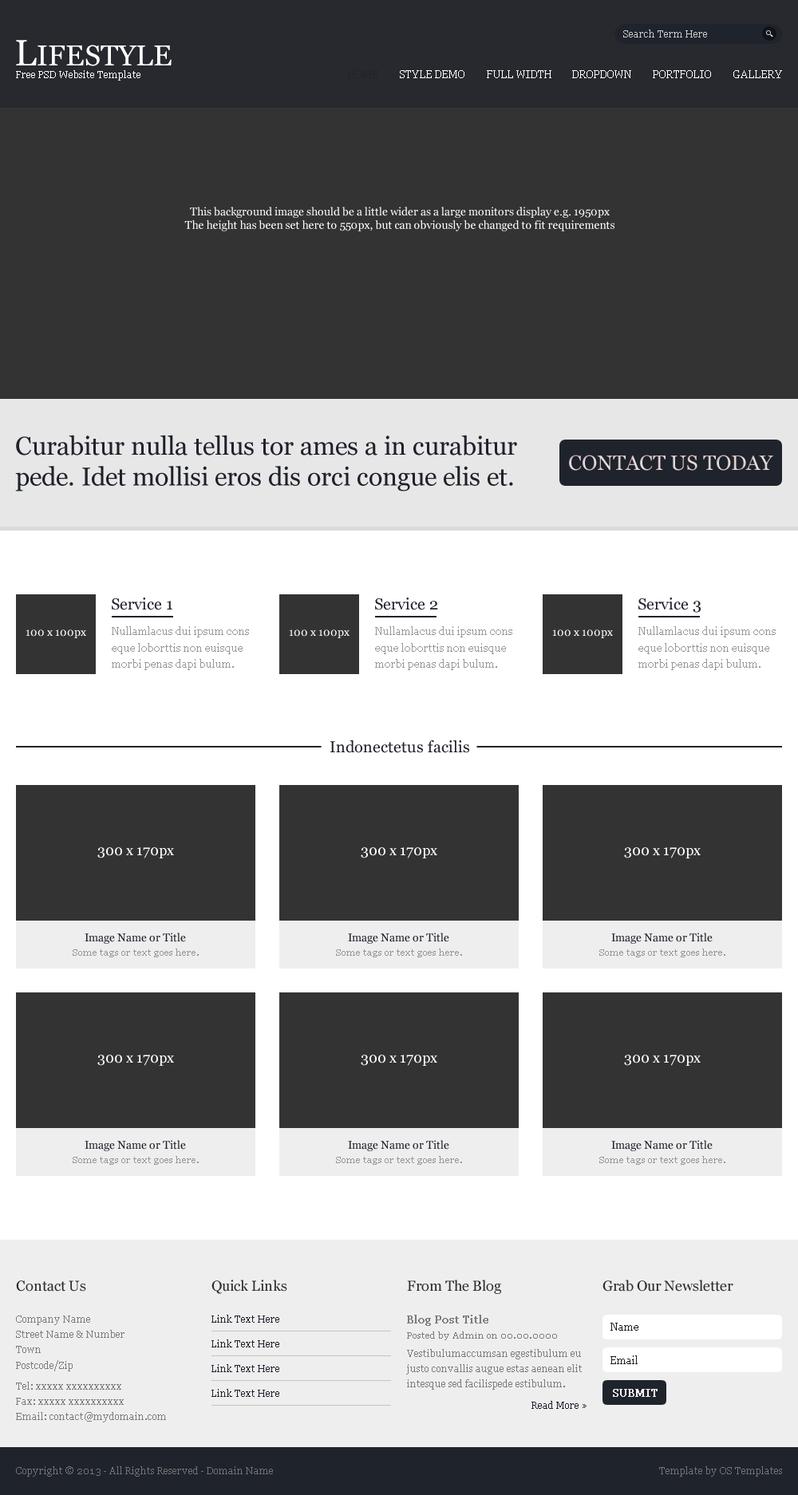
<style>
.page{position:relative;width:798px;height:1495px;background:#333333}
.page>*{position:absolute;margin:0}
.t1{font:9.6px "Georgia";color:#cccccc}
.t2{font:28.7px "Georgia";color:#ffffff}
.t3{font:36.7px "Georgia";color:#ffffff}
.t4{font:9.6px "Georgia";color:#ffffff}
.t5{font:10.4px "Georgia";color:#1f232c}
.t6{font:10.4px "Georgia";color:#ffffff}
.t7{font:11.2px/13.4px "Georgia";color:#ffffff}
.t8{font:25.5px/30.6px "Georgia";color:#1f222c}
.t9{font:20.7px "Georgia";color:#dcd0d0}
.t10{font:16px "Georgia";color:#1f212c}
.t11{font:11.2px "Georgia";color:#ffffff}
.t12{font:10.4px/16.6px "Georgia";color:#979797}
.t13{font:14.4px "Georgia";color:#ffffff}
.t14{font:11.2px "Georgia";color:#1f212c}
.t15{font:8.8px "Georgia";color:#979797}
.t16{font:14.4px "Georgia";color:#2c2c2c}
.t17{font:9.6px/15.3px "Georgia";color:#7c7c7c}
.t18{font:9.6px/21.1px "Georgia";color:#7c7c7c}
.t19{font:9.6px "Georgia";color:#1f232c}
.t20{font:10.4px "Georgia";color:#7c7c7c;font-weight:bold}
.t21{font:10.4px "Georgia";color:#1a1b1d}
.t22{font:8.8px "Georgia";color:#7c7c7c}
.t23{font:10.4px "Georgia";color:#f5f4f2;font-weight:bold}
.t24{font:9.6px "Georgia";color:#737373}
</style>
<div class="page">
<p class="t1" style="left:623px;top:30px;width:84px;height:7px">Search Term Here</p>
<p class="t2" style="left:16px;top:40px;width:156px;height:26px"><span class="t3">L</span>IFESTYLE</p>
<p class="t4" style="left:16px;top:70px;width:124px;height:11px">Free PSD Website Template</p>
<p class="t5" style="left:348px;top:70px;width:30px;height:8px">HOME</p>
<p class="t6" style="left:400px;top:70px;width:64px;height:8px">STYLE DEMO</p>
<p class="t6" style="left:487px;top:70px;width:64px;height:8px">FULL WIDTH</p>
<p class="t6" style="left:572px;top:70px;width:59px;height:8px">DROPDOWN</p>
<p class="t6" style="left:653px;top:70px;width:58px;height:8px">PORTFOLIO</p>
<p class="t6" style="left:733px;top:70px;width:49px;height:8px">GALLERY</p>
<p class="t7" style="left:184px;top:207px;width:430px;height:24px;text-align:center">This background image should be a little wider as a large monitors display e.g. 1950px<br>The height has been set here to 550px, but can obviously be changed to fit requirements</p>
<p class="t8" style="left:15px;top:435px;width:502px;height:56px">Curabitur nulla tellus tor ames a in curabitur <br>pede. Idet mollisi eros dis orci congue elis et.</p>
<p class="t9" style="left:569px;top:455px;width:204px;height:16px">CONTACT US TODAY</p>
<p class="t10" style="left:112px;top:597px;width:60px;height:13px">Service 1</p>
<p class="t10" style="left:375px;top:597px;width:63px;height:13px">Service 2</p>
<p class="t10" style="left:638px;top:597px;width:62px;height:16px">Service 3</p>
<p class="t11" style="left:26px;top:629px;width:60px;height:9px">100 x 100px</p>
<p class="t12" style="left:112px;top:626px;width:137px;height:44px">Nullamlacus dui ipsum cons eque loborttis non euisque morbi penas dapi bulum.</p>
<p class="t11" style="left:289px;top:629px;width:60px;height:9px">100 x 100px</p>
<p class="t12" style="left:375px;top:626px;width:137px;height:44px">Nullamlacus dui ipsum cons eque loborttis non euisque morbi penas dapi bulum.</p>
<p class="t11" style="left:552px;top:629px;width:61px;height:9px">100 x 100px</p>
<p class="t12" style="left:638px;top:626px;width:137px;height:44px">Nullamlacus dui ipsum cons eque loborttis non euisque morbi penas dapi bulum.</p>
<p class="t10" style="left:329px;top:740px;width:140px;height:13px">Indonectetus facilis</p>
<p class="t13" style="left:97px;top:847px;width:77px;height:11px">300 x 170px</p>
<p class="t13" style="left:361px;top:847px;width:76px;height:11px">300 x 170px</p>
<p class="t13" style="left:624px;top:847px;width:76px;height:11px">300 x 170px</p>
<p class="t14" style="left:85px;top:932px;width:101px;height:12px">Image Name or Title</p>
<p class="t14" style="left:348px;top:932px;width:101px;height:12px">Image Name or Title</p>
<p class="t14" style="left:611px;top:932px;width:101px;height:12px">Image Name or Title</p>
<p class="t15" style="left:73px;top:948px;width:126px;height:9px">Some tags or text goes here.</p>
<p class="t15" style="left:336px;top:948px;width:126px;height:9px">Some tags or text goes here.</p>
<p class="t15" style="left:599px;top:948px;width:126px;height:9px">Some tags or text goes here.</p>
<p class="t13" style="left:97px;top:1055px;width:77px;height:11px">300 x 170px</p>
<p class="t13" style="left:361px;top:1055px;width:76px;height:11px">300 x 170px</p>
<p class="t13" style="left:624px;top:1055px;width:76px;height:11px">300 x 170px</p>
<p class="t14" style="left:85px;top:1140px;width:101px;height:11px">Image Name or Title</p>
<p class="t14" style="left:348px;top:1140px;width:101px;height:11px">Image Name or Title</p>
<p class="t14" style="left:611px;top:1140px;width:101px;height:11px">Image Name or Title</p>
<p class="t15" style="left:73px;top:1156px;width:126px;height:9px">Some tags or text goes here.</p>
<p class="t15" style="left:336px;top:1156px;width:126px;height:9px">Some tags or text goes here.</p>
<p class="t15" style="left:599px;top:1156px;width:126px;height:9px">Some tags or text goes here.</p>
<p class="t16" style="left:16px;top:1280px;width:70px;height:11px">Contact Us</p>
<p class="t16" style="left:211px;top:1279px;width:76px;height:15px">Quick Links</p>
<p class="t16" style="left:407px;top:1279px;width:94px;height:15px">From The Blog</p>
<p class="t16" style="left:602px;top:1279px;width:131px;height:12px">Grab Our Newsletter</p>
<p class="t17" style="left:16px;top:1315px;width:150px;height:107px">Company Name<br>Street Name &amp; Number<br>Town<br>Postcode/Zip<span class="t18"><br>Tel: xxxxx xxxxxxxxxx<br></span>Fax: xxxxx xxxxxxxxxx<br>Email: contact@mydomain.com</p>
<p class="t19" style="left:211px;top:1315px;width:68px;height:8px">Link Text Here</p>
<p class="t20" style="left:407px;top:1315px;width:81px;height:11px">Blog Post Title</p>
<p class="t21" style="left:610px;top:1323px;width:28px;height:8px">Name</p>
<p class="t22" style="left:407px;top:1331px;width:150px;height:9px">Posted by Admin on 00.00.0000</p>
<p class="t19" style="left:211px;top:1339px;width:68px;height:8px">Link Text Here</p>
<p class="t17" style="left:406px;top:1349px;width:176px;height:41px">Vestibulumaccumsan egestibulum eu justo convallis augue estas aenean elit intesque sed facilispede estibulum.</p>
<p class="t21" style="left:610px;top:1355px;width:27px;height:9px">Email</p>
<p class="t19" style="left:211px;top:1364px;width:68px;height:8px">Link Text Here</p>
<p class="t19" style="left:211px;top:1389px;width:68px;height:8px">Link Text Here</p>
<p class="t23" style="left:613px;top:1389px;width:44px;height:8px">SUBMIT</p>
<p class="t19" style="left:531px;top:1401px;width:55px;height:8px">Read More »</p>
<p class="t24" style="left:16px;top:1466px;width:257px;height:11px">Copyright © 2013 - All Rights Reserved - Domain Name</p>
<p class="t24" style="left:659px;top:1466px;width:123px;height:11px">Template by OS Templates</p>
</div>
